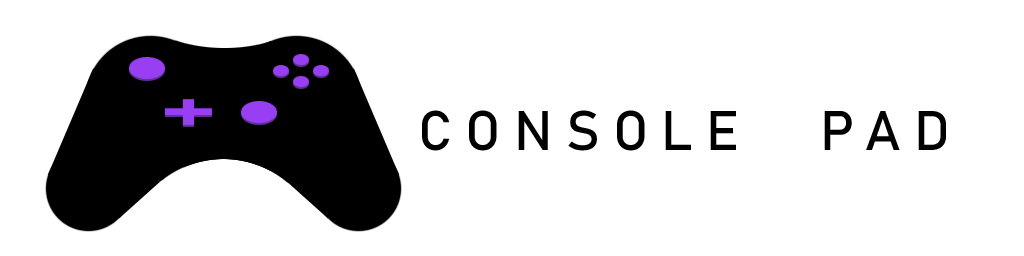
<style>
.page{position:relative;width:1024px;height:256px;background:#ffffff}
.page>*{position:absolute;margin:0}
.t1{font:55px "Bahnschrift";letter-spacing:0.24em;color:#000000}
</style>
<div class="page">
<p class="t1" style="left:422px;top:110px;width:524px;height:41px">CONSOLE   PAD</p>
</div>
